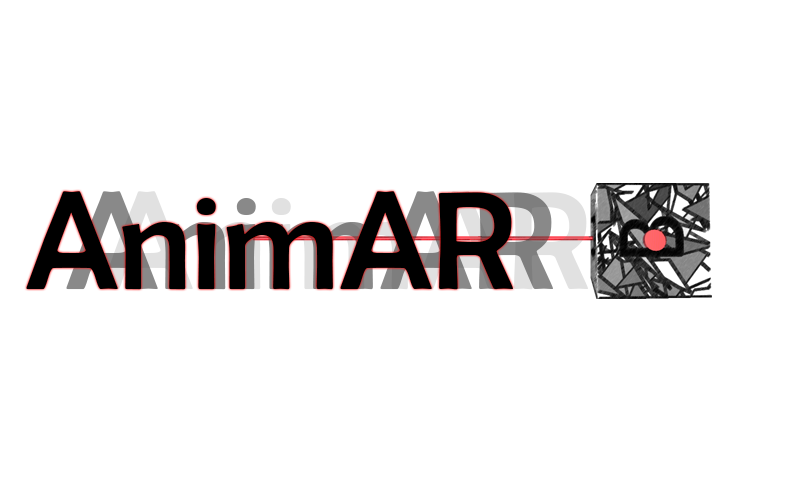
<style>
.page{position:relative;width:800px;height:500px;background:#ffffff}
.page>*{position:absolute;margin:0}
.t1{font:140px "BerlinSansFB-Reg";color:#000000}
.t2{font:140px "BerlinSansFB-Reg"}
</style>
<div class="page">
<p class="t1" style="left:26px;top:191px;width:487px;height:99px">AnimAR</p>
<p class="t2" style="left:66px;top:191px;width:487px;height:99px">AnimAR</p>
</div>
